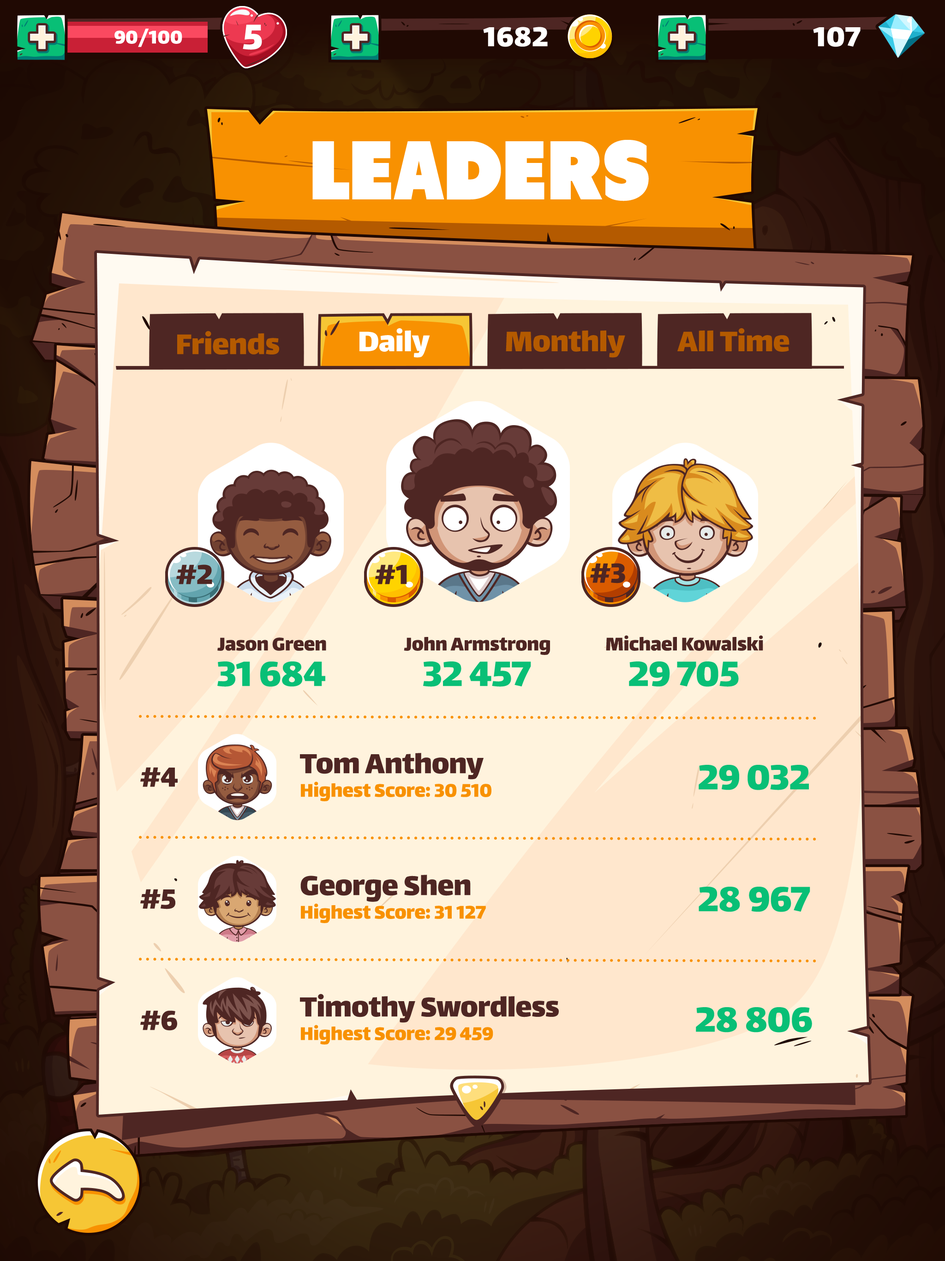
<style>
.page{position:relative;width:945px;height:1261px}
.page>*{position:absolute;margin:0}
.t1{font:57.2px "Lalezar-Regular";color:#fff3dd}
.t2{font:22.2px "Lalezar-Regular";color:#ffffff}
.t3{font:42.5px "Lalezar-Regular";color:#ffffff}
.t4{font:33.2px "Lalezar-Regular";color:#ffffff}
.t5{font:83.1px "Tondu-Beta";color:#ffffff;text-transform:uppercase}
.t6{font:34.1px "Lalezar-Regular";color:#ffffff}
.t7{font:34.1px "Lalezar-Regular";color:#b45a00}
.t8{font:33.2px "Lalezar-Regular";color:#4e2623}
.t9{font:22.2px "Lalezar-Regular";color:#4e2623}
.t10{font:42.5px "Lalezar-Regular";color:#08bf76}
.t11{font:22.2px/23.5px "Lalezar-Regular";color:#f89101}
.t12{font:33.2px/8.3px "Lalezar-Regular";color:#4e2623}
</style>
<div class="page">
<p class="t1" style="left:30px;top:25px;width:24px;height:24px">+</p>
<p class="t2" style="left:114px;top:29px;width:68px;height:18px">90/100</p>
<p class="t3" style="left:243px;top:24px;width:19px;height:26px">5</p>
<p class="t1" style="left:344px;top:25px;width:24px;height:24px">+</p>
<p class="t4" style="left:483px;top:27px;width:65px;height:20px">1682</p>
<p class="t1" style="left:670px;top:25px;width:24px;height:24px">+</p>
<p class="t4" style="left:813px;top:27px;width:48px;height:20px">107</p>
<p class="t5" style="left:313px;top:140px;width:336px;height:61px">Leaders</p>
<p class="t6" style="left:360px;top:328px;width:70px;height:30px">Daily</p>
<p class="t7" style="left:678px;top:328px;width:112px;height:24px">All Time</p>
<p class="t7" style="left:177px;top:331px;width:102px;height:24px">Friends</p>
<p class="t7" style="left:506px;top:331px;width:120px;height:27px">Monthly</p>
<p class="t8" style="left:176px;top:565px;width:36px;height:19px">#2</p>
<p class="t8" style="left:375px;top:565px;width:32px;height:19px">#1</p>
<p class="t8" style="left:590px;top:563px;width:36px;height:21px">#3</p>
<p class="t9" style="left:217px;top:638px;width:109px;height:13px">Jason Green</p>
<p class="t9" style="left:404px;top:637px;width:146px;height:18px">John Armstrong</p>
<p class="t9" style="left:606px;top:635px;width:158px;height:16px">Michael Kowalski</p>
<p class="t10" style="left:217px;top:662px;width:108px;height:25px">31 684</p>
<p class="t10" style="left:423px;top:662px;width:108px;height:25px">32 457</p>
<p class="t10" style="left:629px;top:662px;width:110px;height:25px">29 705</p>
<p class="t11" style="left:300px;top:753px;width:192px;height:48px"><span class="t12">Tom Anthony<br></span>Highest Score: 30 510</p>
<p class="t8" style="left:140px;top:767px;width:38px;height:20px">#4</p>
<p class="t10" style="left:699px;top:765px;width:110px;height:25px">29 032</p>
<p class="t11" style="left:301px;top:875px;width:185px;height:48px"><span class="t12">George Shen<br></span>Highest Score: 31 127</p>
<p class="t8" style="left:140px;top:889px;width:35px;height:20px">#5</p>
<p class="t10" style="left:699px;top:887px;width:112px;height:25px">28 967</p>
<p class="t11" style="left:300px;top:994px;width:259px;height:51px"><span class="t12">Timothy Swordless<br></span>Highest Score: 29 459</p>
<p class="t8" style="left:140px;top:1011px;width:37px;height:20px">#6</p>
<p class="t10" style="left:696px;top:1007px;width:117px;height:26px">28 806</p>
</div>
